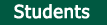
<style>
.page{position:relative;width:107px;height:25px;background:#005941}
.page>*{position:absolute;margin:0}
.t1{font:18px "Tahoma";letter-spacing:0.02em;color:#ffffff;font-weight:bold}
</style>
<div class="page">
<p class="t1" style="left:14px;top:4px;width:76px;height:15px">Students</p>
</div>
